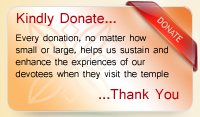
<style>
.page{position:relative;width:200px;height:117px}
.page>*{position:absolute;margin:0}
.t1{font:15px "Shruti";color:#b9000d}
.t2{font:10px "Shruti";color:#000000}
</style>
<div class="page">
<p class="t1" style="left:17px;top:13px;width:99px;height:13px">Kindly Donate...</p>
<p class="t2" style="left:15px;top:34px;width:154px;height:45px">Every donation, no matter how small or large, helps us sustain and enhance the expriences of our devotees when they visit the temple</p>
<p class="t1" style="left:99px;top:89px;width:80px;height:11px">...Thank You</p>
</div>
